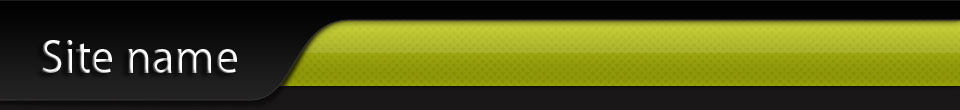
<style>
.page{position:relative;width:960px;height:110px}
.page>*{position:absolute;margin:0}
.t1{font:48px "MyriadPro-Regular"}
</style>
<div class="page">
<p class="t1" style="left:42px;top:40px;width:195px;height:33px">Site name</p>
</div>
